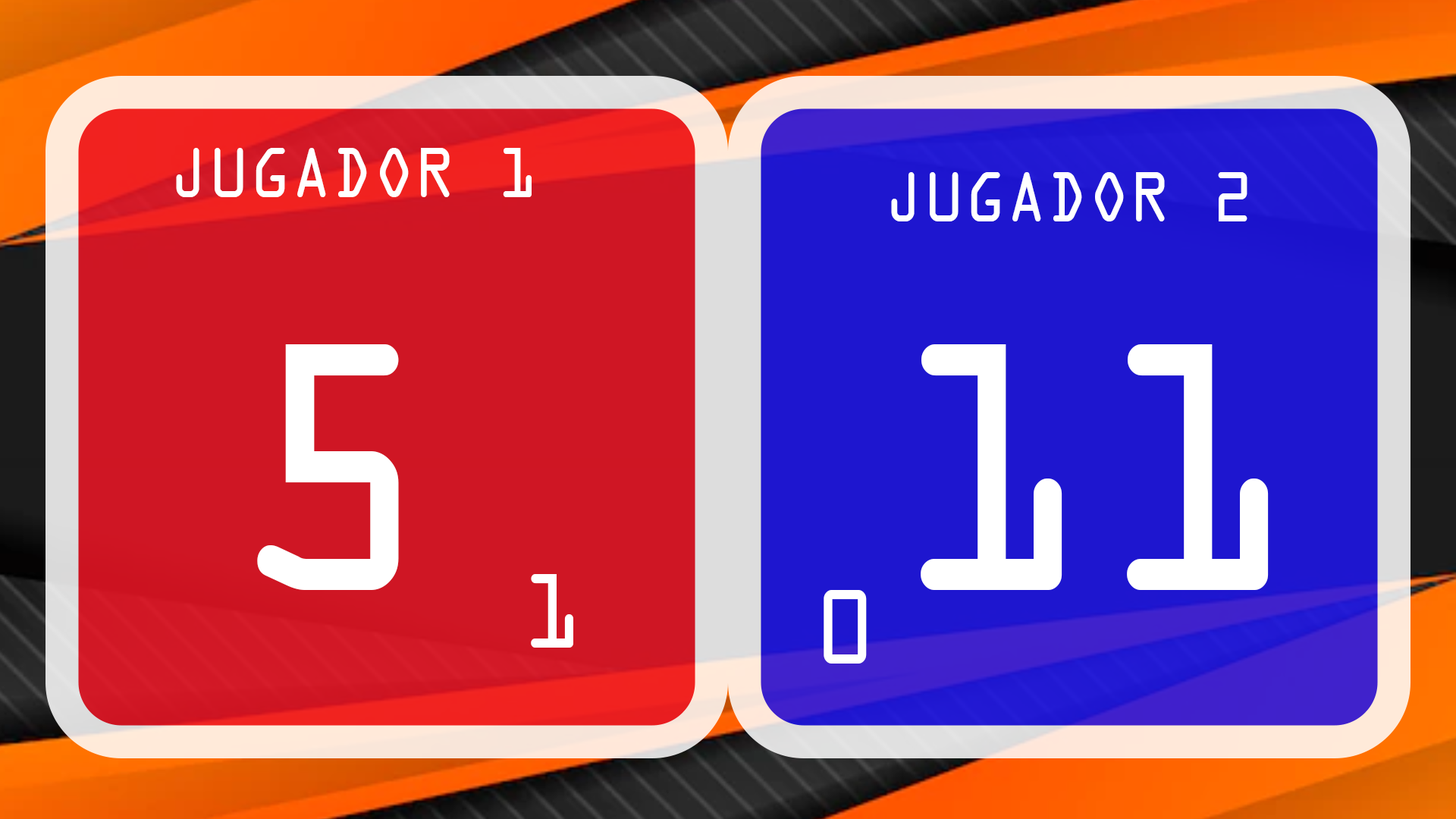
<style>
.page{position:relative;width:1456px;height:819px}
.page>*{position:absolute;margin:0}
.t1{font:75.8px "OCRAExtended";color:#ffffff;scale:0.9 1}
.t2{font:379.2px "OCRAExtended";color:#ffffff;scale:0.9 1}
.t3{font:113.7px "OCRAExtended";color:#ffffff;scale:0.9 1}
</style>
<div class="page">
<p class="t1" style="left:176px;top:148px;width:356px;height:49px">JUGADOR 1</p>
<p class="t1" style="left:891px;top:172px;width:356px;height:49px">JUGADOR 2</p>
<p class="t2" style="left:257px;top:344px;width:142px;height:246px">5</p>
<p class="t2" style="left:921px;top:344px;width:348px;height:246px">11</p>
<p class="t3" style="left:531px;top:574px;width:42px;height:74px">1</p>
<p class="t3" style="left:824px;top:590px;width:43px;height:74px">0</p>
</div>
